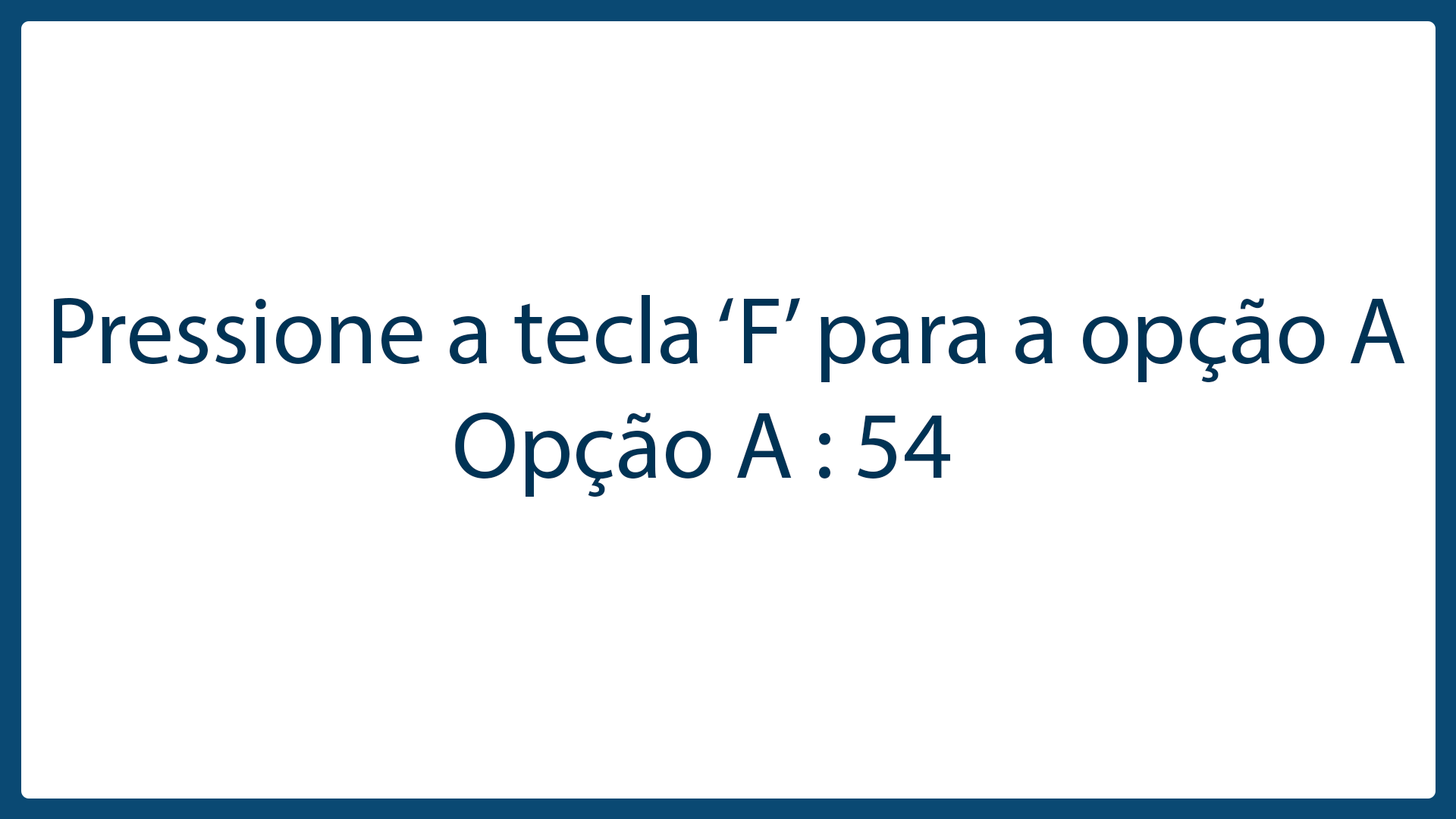
<style>
.page{position:relative;width:1456px;height:819px;background:#ffffff}
.page>*{position:absolute;margin:0}
.t1{font:95.9px "MyriadPro-Regular";color:#003355}
</style>
<div class="page">
<p class="t1" style="left:54px;top:295px;width:1351px;height:202px">Pressione a tecla ‘F’ para a opção A<br>                    Opção A : 54</p>
</div>
